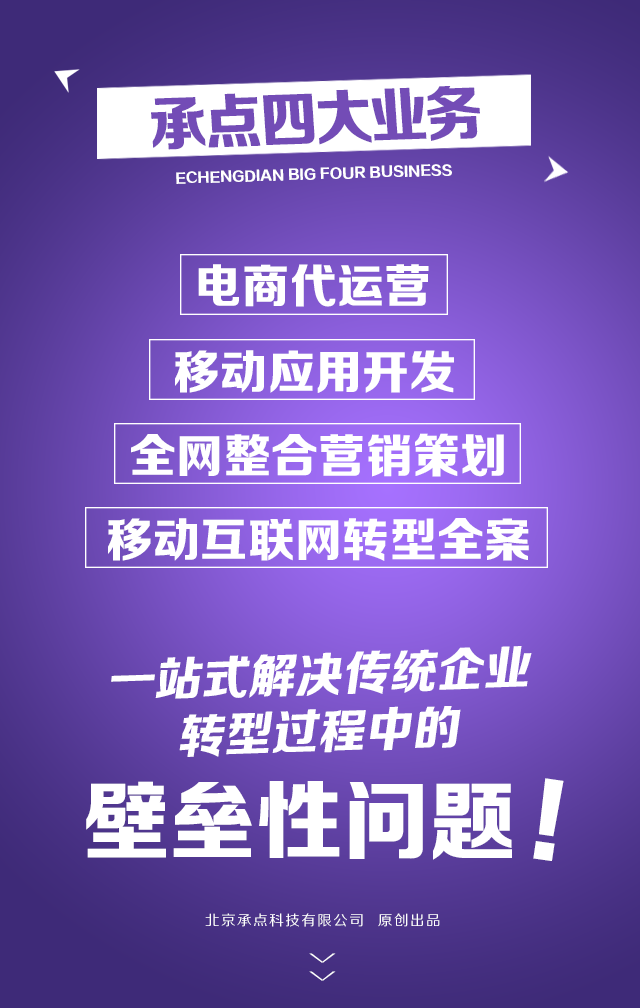
<style>
.page{position:relative;width:640px;height:1008px}
.page>*{position:absolute;margin:0}
.t1{font:60.1px "FZZDHJW--GB1-0";letter-spacing:-0.05em;color:#734cb6;text-transform:uppercase;scale:0.97 1}
.t2{font:13.4px "FZZDHJW--GB1-0";letter-spacing:0.005em;color:#ffffff;text-transform:uppercase}
.t3{font:46.7px "FZZDHJW--GB1-0";letter-spacing:0.005em;color:#ffffff;text-transform:uppercase}
.t4{font:47.9px "FZZDHJW--GB1-0";letter-spacing:0.005em;color:#ffffff;text-transform:uppercase}
.t5{font:86.5px "FZZDHJW--GB1-0";letter-spacing:0.005em;color:#ffffff;text-transform:uppercase}
.t6{font:96.1px "FZZDHJW--GB1-0";letter-spacing:0.005em;color:#ffffff;text-transform:uppercase}
.t7{font:14.2px "FZZHJW--GB1-0";letter-spacing:0.1em;color:#ffffff;text-transform:uppercase}
.t8{font:36.8px "FZZXHJW--GB1-0";letter-spacing:0.5em;color:#ffffff;text-transform:uppercase;scale:0.44 1}
</style>
<div class="page">
<p class="t1" style="left:151px;top:86px;width:329px;height:64px;rotate:-2deg">承点四大业务</p>
<p class="t2" style="left:176px;top:164px;width:276px;height:20px;rotate:-2deg">ECHENGDIAN big four business</p>
<p class="t3" style="left:198px;top:264px;width:231px;height:43px">电商代运营</p>
<p class="t3" style="left:175px;top:350px;width:279px;height:43px">移动应用开发</p>
<p class="t3" style="left:131px;top:433px;width:373px;height:44px">全网整合营销策划</p>
<p class="t3" style="left:108px;top:518px;width:421px;height:43px">移动互联网转型全案</p>
<p class="t4" style="left:111px;top:646px;width:421px;height:53px;rotate:-2deg">一站式解决传统企业</p>
<p class="t4" style="left:179px;top:706px;width:282px;height:51px;rotate:-2deg">转型过程中的</p>
<p class="t5" style="left:86px;top:781px;width:426px;height:79px">壁垒性问题</p>
<p class="t6" style="left:533px;top:778px;width:31px;height:83px;rotate:8deg">!</p>
<p class="t7" style="left:205px;top:913px;width:235px;height:14px">北京承点科技有限公司  原创出品</p>
<p class="t8" style="left:309px;top:953px;width:27px;height:28px;rotate:90deg">&gt;&gt;</p>
</div>
